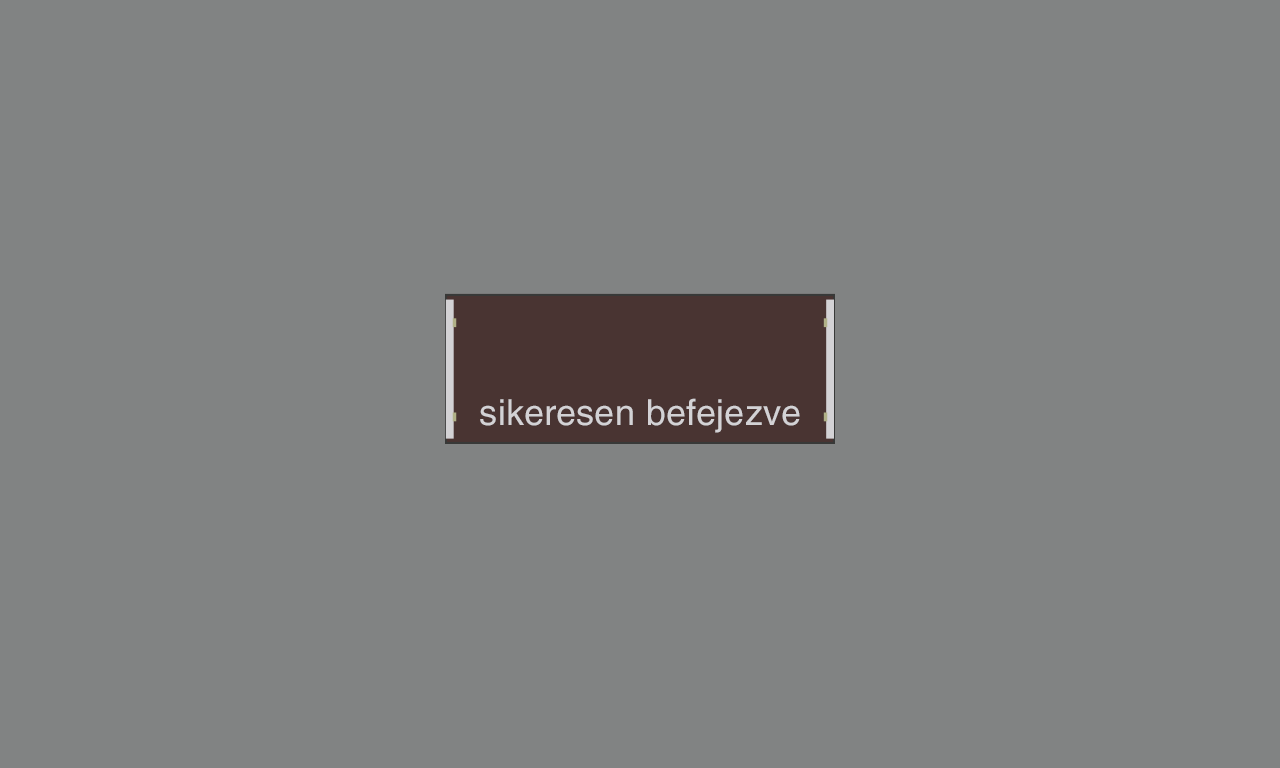
<style>
.page{position:relative;width:1280px;height:768px;background:#818383}
.page>*{position:absolute;margin:0}
.t1{font:36px "HelveticaLTStd-Roman";letter-spacing:0.01em;color:#d3d2d5}
</style>
<div class="page">
<p class="t1" style="left:480px;top:398px;width:320px;height:35px">sikeresen befejezve</p>
</div>
